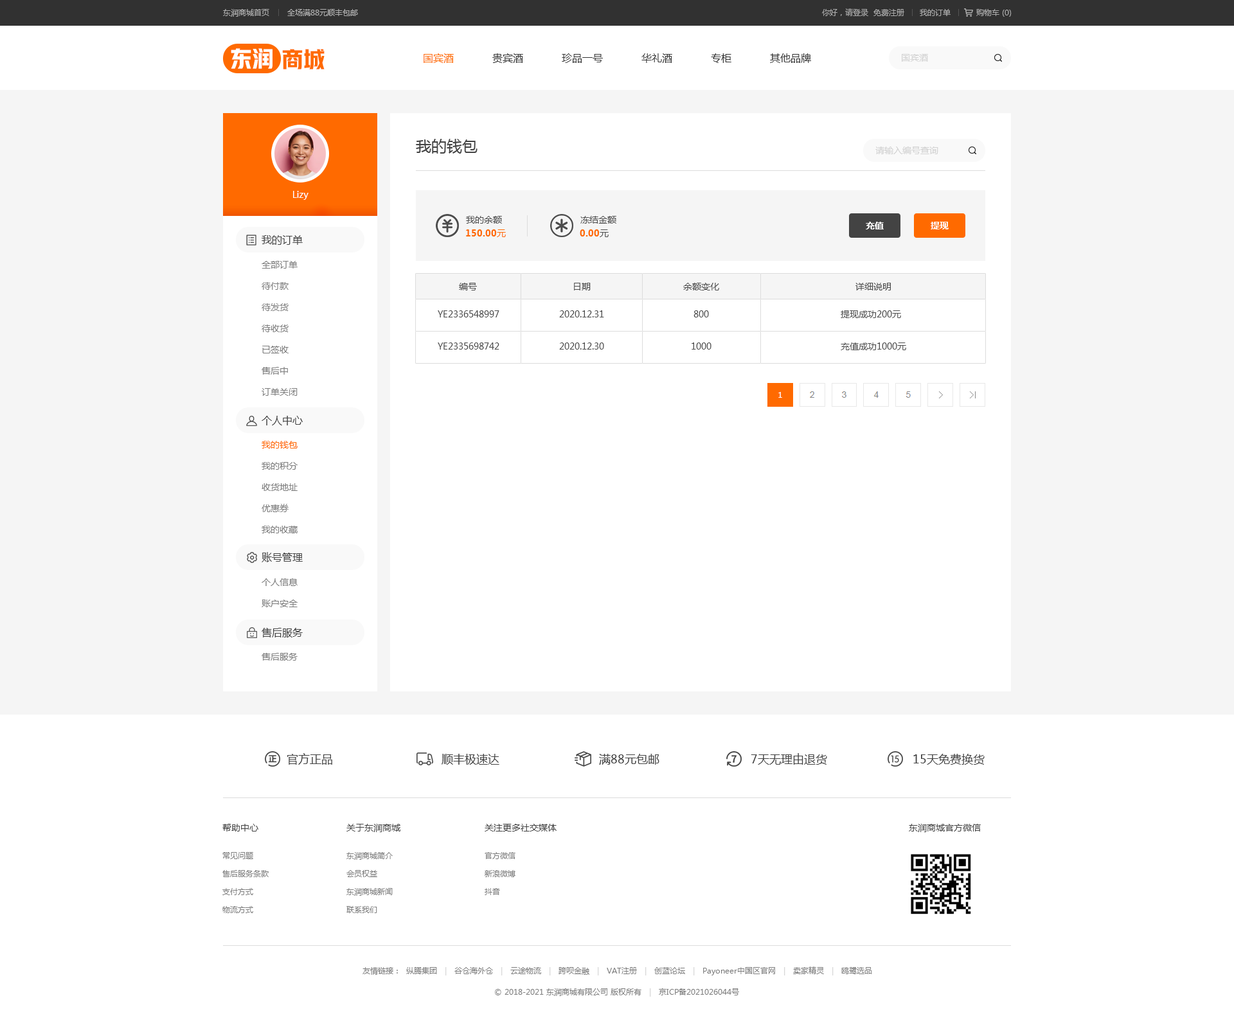
<style>
.page{position:relative;width:1234px;height:1023px;background:#ffffff}
.page>*{position:absolute;margin:0}
.t1{font:7.7px "MicrosoftYaHei";color:#b0b0b0}
.t2{font:7.7px "MicrosoftYaHei";color:#acacac}
.t3{font:21.9px "HYYakuHei-HEW";color:#ffffff}
.t4{font:21.9px "HYYakuHei-HEW";color:#ff6a00}
.t5{font:10.3px "MicrosoftYaHei";color:#333333}
.t6{font:10.3px "MicrosoftYaHei";color:#ff6a00}
.t7{font:9px "MicrosoftYaHei";color:#d2d2d2}
.t8{font:15.4px "MicrosoftYaHei";color:#434343}
.t9{font:9px "MicrosoftYaHei";color:#ffffff}
.t10{font:9px "MicrosoftYaHei";color:#4b4b4b}
.t11{font:9px "MicrosoftYaHei-Bold";color:#ffffff}
.t12{font:9px "MicrosoftYaHei-Bold";color:#ff6a00}
.t13{font:9px "MicrosoftYaHei";color:#ff6a00}
.t14{font:10.3px "MicrosoftYaHei";color:#434343}
.t15{font:9px/21.2px "MicrosoftYaHei";color:#7d7d7d}
.t16{font:9px/32.1px "MicrosoftYaHei";color:#4b4b4b}
.t17{font:7.7px "MicrosoftYaHei";color:#ffffff;text-transform:uppercase}
.t18{font:9px/21.2px "MicrosoftYaHei";color:#ff6a00}
.t19{font:9px "MicrosoftYaHei";color:#7d7d7d}
.t20{font:11.6px "MicrosoftYaHei";color:#434343}
.t21{font:9px "MicrosoftYaHei";color:#434343}
.t22{font:7.7px/18px "MicrosoftYaHei";color:#7d7d7d}
.t23{font:7.7px "MicrosoftYaHei";color:#7d7d7d}
.t24{font:7.7px "MicrosoftYaHei";color:#d2d2d2}
</style>
<div class="page">
<p class="t1" style="left:223px;top:9px;width:135px;height:8px">东润商城首页       全场满88元顺丰包邮</p>
<p class="t2" style="left:822px;top:8px;width:190px;height:9px">你好，请登录  免费注册      我的订单          购物车 (0)</p>
<p class="t3" style="left:231px;top:48px;width:42px;height:21px">东润</p>
<p class="t4" style="left:282px;top:49px;width:43px;height:20px">商城</p>
<p class="t5" style="left:424px;top:53px;width:387px;height:10px"><span class="t6">国宾酒</span>            贵宾酒            珍品一号            华礼酒            专柜            其他品牌</p>
<p class="t7" style="left:902px;top:54px;width:26px;height:8px">国宾酒</p>
<p class="t8" style="left:416px;top:139px;width:62px;height:15px">我的钱包</p>
<p class="t7" style="left:876px;top:147px;width:63px;height:7px">请输入编号查询</p>
<p class="t9" style="left:293px;top:191px;width:16px;height:9px">Lizy</p>
<p class="t10" style="left:466px;top:216px;width:36px;height:8px">我的余额</p>
<p class="t10" style="left:580px;top:216px;width:36px;height:8px">冻结金额</p>
<p class="t11" style="left:866px;top:222px;width:18px;height:8px">充值</p>
<p class="t11" style="left:931px;top:222px;width:18px;height:8px">提现</p>
<p class="t12" style="left:466px;top:230px;width:40px;height:7px">150.00<span class="t13">元</span></p>
<p class="t12" style="left:580px;top:230px;width:29px;height:7px">0.00<span class="t10">元</span></p>
<p class="t14" style="left:262px;top:235px;width:41px;height:10px">我的订单</p>
<p class="t15" style="left:262px;top:261px;width:36px;height:135px">全部订单<br>待付款<br>待发货<br>待收货<br>已签收<br>售后中<br>订单关闭</p>
<p class="t10" style="left:459px;top:283px;width:18px;height:8px">编号</p>
<p class="t10" style="left:574px;top:283px;width:17px;height:8px">日期</p>
<p class="t10" style="left:683px;top:283px;width:36px;height:8px">余额变化</p>
<p class="t10" style="left:856px;top:283px;width:35px;height:8px">详细说明</p>
<p class="t16" style="left:438px;top:310px;width:62px;height:40px">YE2336548997<br>YE2335698742</p>
<p class="t16" style="left:559px;top:310px;width:45px;height:40px">2020.12.31<br>2020.12.30</p>
<p class="t16" style="left:692px;top:310px;width:20px;height:40px;text-align:center">800<br>1000</p>
<p class="t16" style="left:841px;top:310px;width:65px;height:40px">提现成功200元<br>充值成功1000元</p>
<p class="t17" style="left:779px;top:392px;width:3px;height:6px">1</p>
<p class="t14" style="left:262px;top:416px;width:41px;height:10px">个人中心</p>
<p class="t15" style="left:262px;top:441px;width:36px;height:93px"><span class="t18">我的钱包<br></span>我的积分<br>收货地址<br>优惠券<br>我的收藏</p>
<p class="t14" style="left:262px;top:552px;width:41px;height:10px">账号管理</p>
<p class="t15" style="left:262px;top:579px;width:36px;height:29px">个人信息<br>账户安全</p>
<p class="t14" style="left:262px;top:628px;width:41px;height:10px">售后服务</p>
<p class="t19" style="left:262px;top:653px;width:36px;height:8px">售后服务</p>
<p class="t20" style="left:287px;top:753px;width:45px;height:12px">官方正品</p>
<p class="t20" style="left:442px;top:754px;width:58px;height:11px">顺丰极速达</p>
<p class="t20" style="left:599px;top:754px;width:61px;height:11px">满88元包邮</p>
<p class="t20" style="left:751px;top:753px;width:76px;height:12px">7天无理由退货</p>
<p class="t20" style="left:914px;top:754px;width:71px;height:11px">15天免费换货</p>
<p class="t21" style="left:222px;top:824px;width:36px;height:8px">帮助中心</p>
<p class="t21" style="left:346px;top:824px;width:55px;height:9px">关于东润商城</p>
<p class="t21" style="left:485px;top:824px;width:72px;height:8px">关注更多社交媒体</p>
<p class="t21" style="left:909px;top:824px;width:72px;height:9px">东润商城官方微信</p>
<p class="t22" style="left:222px;top:852px;width:47px;height:62px">常见问题<br>售后服务条款<br>支付方式<br>物流方式</p>
<p class="t22" style="left:346px;top:852px;width:47px;height:62px">东润商城简介<br>会员权益<br>东润商城新闻<br>联系我们</p>
<p class="t22" style="left:485px;top:852px;width:31px;height:44px">官方微信<br>新浪微博<br>抖音</p>
<p class="t23" style="left:363px;top:967px;width:509px;height:9px">友情链接：  纵腾集团   <span class="t24">|   </span>谷仓海外仓   <span class="t24">|   </span>云途物流   <span class="t24">|   </span>跨呗金融   <span class="t24">|   </span>VAT注册   <span class="t24">|   </span>创蓝论坛   <span class="t24">|   </span>Payoneer中国区官网   <span class="t24">|   </span>卖家精灵   <span class="t24">|   </span>鸥鹭选品</p>
<p class="t23" style="left:495px;top:989px;width:244px;height:8px">© 2018-2021 东润商城有限公司 版权所有   <span class="t24">|   </span>京ICP备2021026044号</p>
</div>
